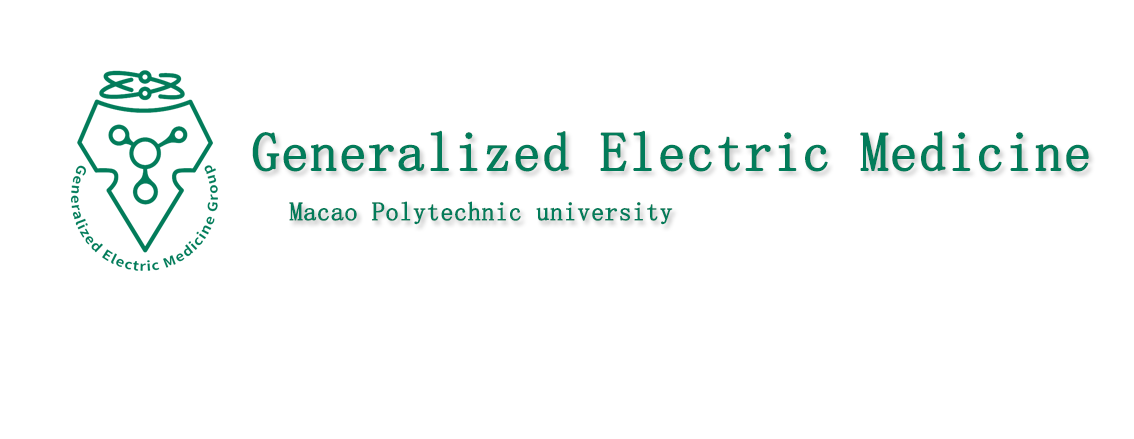
<style>
.page{position:relative;width:1134px;height:439px;background:#ffffff}
.page>*{position:absolute;margin:0}
.t1{font:55px "SimSun";color:#027c5a;font-weight:bold}
.t2{font:26px "SimSun";color:#027c5a;font-weight:bold}
</style>
<div class="page">
<p class="t1" style="left:252px;top:130px;width:837px;height:42px">Generalized Electric Medicine</p>
<p class="t2" style="left:289px;top:201px;width:384px;height:24px">Macao Polytechnic university</p>
</div>
